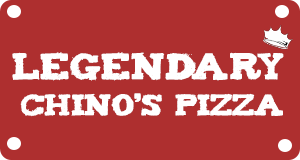
<style>
.page{position:relative;width:300px;height:160px;background:#ae2f2f}
.page>*{position:absolute;margin:0}
.t1{font:30px "Tiza";color:#fefefe}
.t2{font:24px "Tiza";color:#ffffff}
</style>
<div class="page">
<p class="t1" style="left:12px;top:52px;width:272px;height:29px">Legendary</p>
<p class="t2" style="left:20px;top:93px;width:263px;height:24px">CHino’s Pizza</p>
</div>
